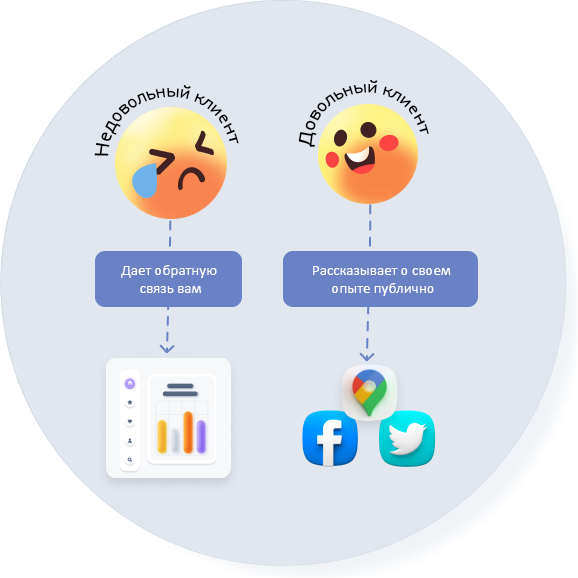
<style>
.page{position:relative;width:578px;height:578px;background:#e2e7ef}
.page>*{position:absolute;margin:0}
.t1{font:13px "Calibri";color:#000000}
.t2{font:15px "Calibri";color:#ffffff}
</style>
<div class="page">
<p class="t1" style="left:94px;top:85px;width:145px;height:71px;rotate:-6deg">Недовольный клиент</p>
<p class="t1" style="left:298px;top:79px;width:131px;height:68px;rotate:-6deg">Довольный клиент</p>
<p class="t2" style="left:121px;top:265px;width:96px;height:28px;text-align:center">Дает обратную <br>связь вам</p>
<p class="t2" style="left:313px;top:266px;width:138px;height:30px;text-align:center">Рассказывает о своем<br> опыте публично</p>
</div>
